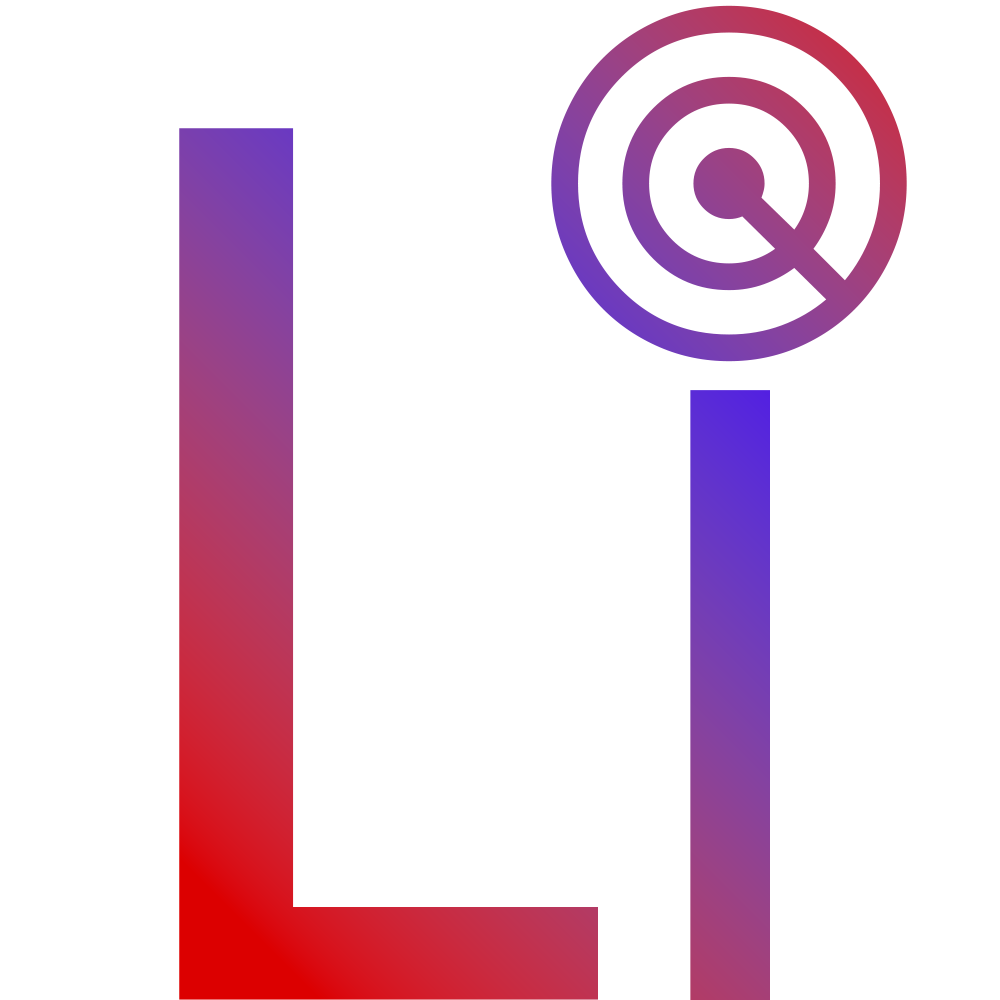
<style>
.page{position:relative;width:1000px;height:1000px;background:#ffffff}
.page>*{position:absolute;margin:0}
.t1{font:1250px "Poppins-Regular";font-variant:small-caps}
</style>
<div class="page">
<p class="t1" style="left:179px;top:128px;width:591px;height:872px">Li</p>
</div>
